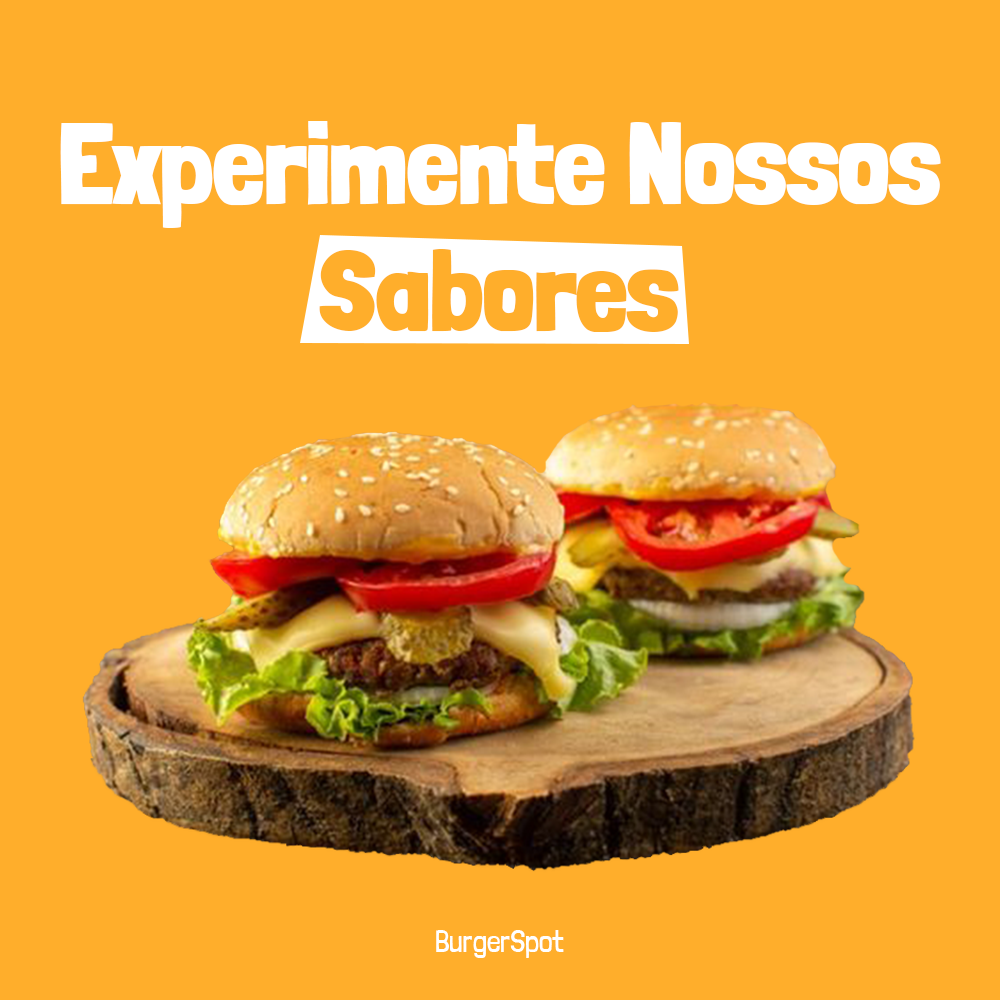
<style>
.page{position:relative;width:1000px;height:1000px;background:#ffae2b}
.page>*{position:absolute;margin:0}
.t1{font:114.2px/127px "LondrinaSolid-Black";color:#ffffff}
.t2{font:114.2px/127px "LondrinaSolid-Black";color:#ffae2b}
.t3{font:30px "LondrinaSolid-Light";color:#ffffff}
</style>
<div class="page">
<p class="t1" style="left:60px;top:121px;width:881px;height:211px;text-align:center">Experimente Nossos<br><span class="t2">Sabores</span></p>
<p class="t3" style="left:436px;top:930px;width:128px;height:28px">BurgerSpot</p>
</div>
